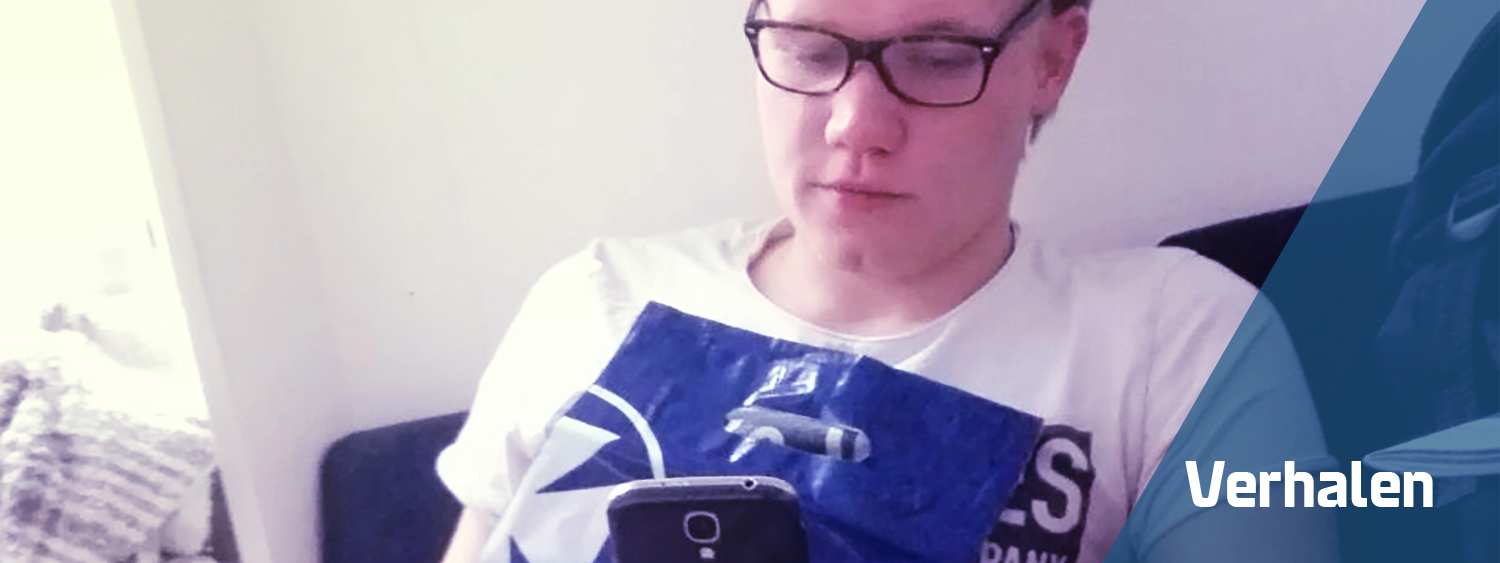
<style>
.page{position:relative;width:1500px;height:563px}
.page>*{position:absolute;margin:0}
.t1{font:65px "DFDSBold";color:#ffffff}
</style>
<div class="page">
<p class="t1" style="left:1185px;top:461px;width:248px;height:46px">Verhalen</p>
</div>
